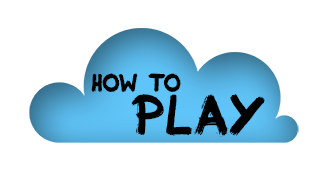
<style>
.page{position:relative;width:333px;height:196px;background:#ffffff}
.page>*{position:absolute;margin:0}
.t1{font:24.3px "Inky";color:#000000}
.t2{font:55.4px "Inky";color:#000000}
</style>
<div class="page">
<p class="t1" style="left:91px;top:73px;width:90px;height:19px">how to</p>
<p class="t2" style="left:131px;top:94px;width:134px;height:43px">PLAY</p>
</div>
